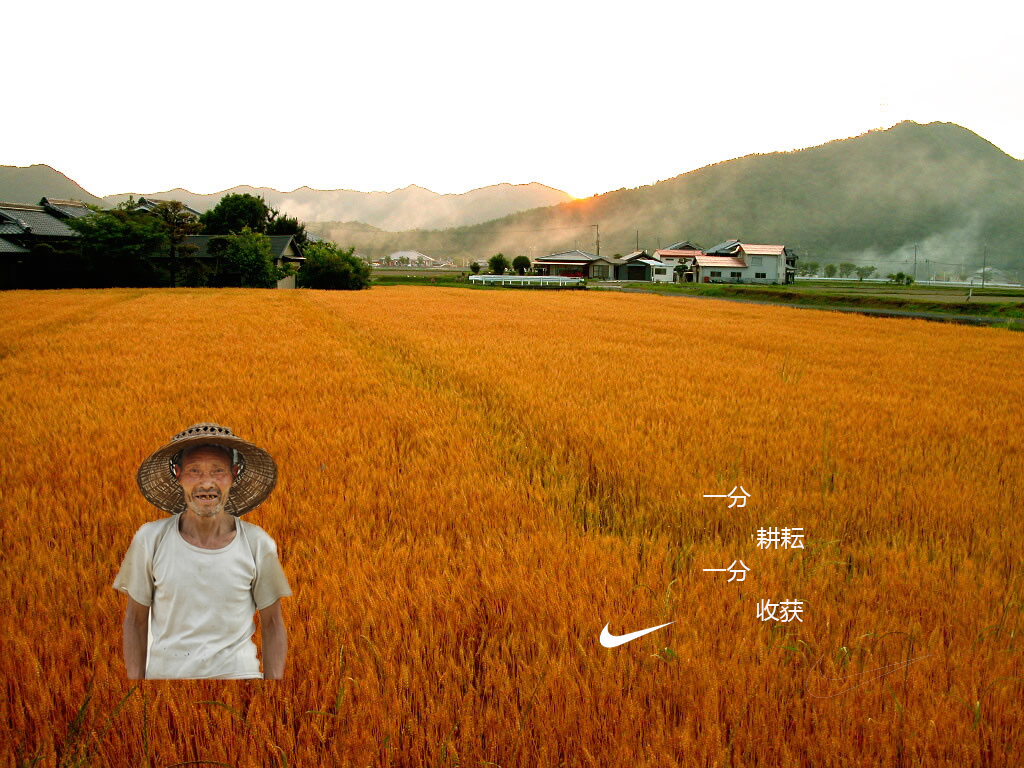
<style>
.page{position:relative;width:1024px;height:768px;background:#ffffff}
.page>*{position:absolute;margin:0}
.t1{font:24px "MicrosoftYaHei";color:#fbf6f6}
</style>
<div class="page">
<p class="t1" style="left:703px;top:486px;width:48px;height:22px">一分</p>
<p class="t1" style="left:756px;top:527px;width:49px;height:22px">耕耘</p>
<p class="t1" style="left:702px;top:560px;width:49px;height:22px">一分</p>
<p class="t1" style="left:756px;top:599px;width:47px;height:23px">收获</p>
</div>
